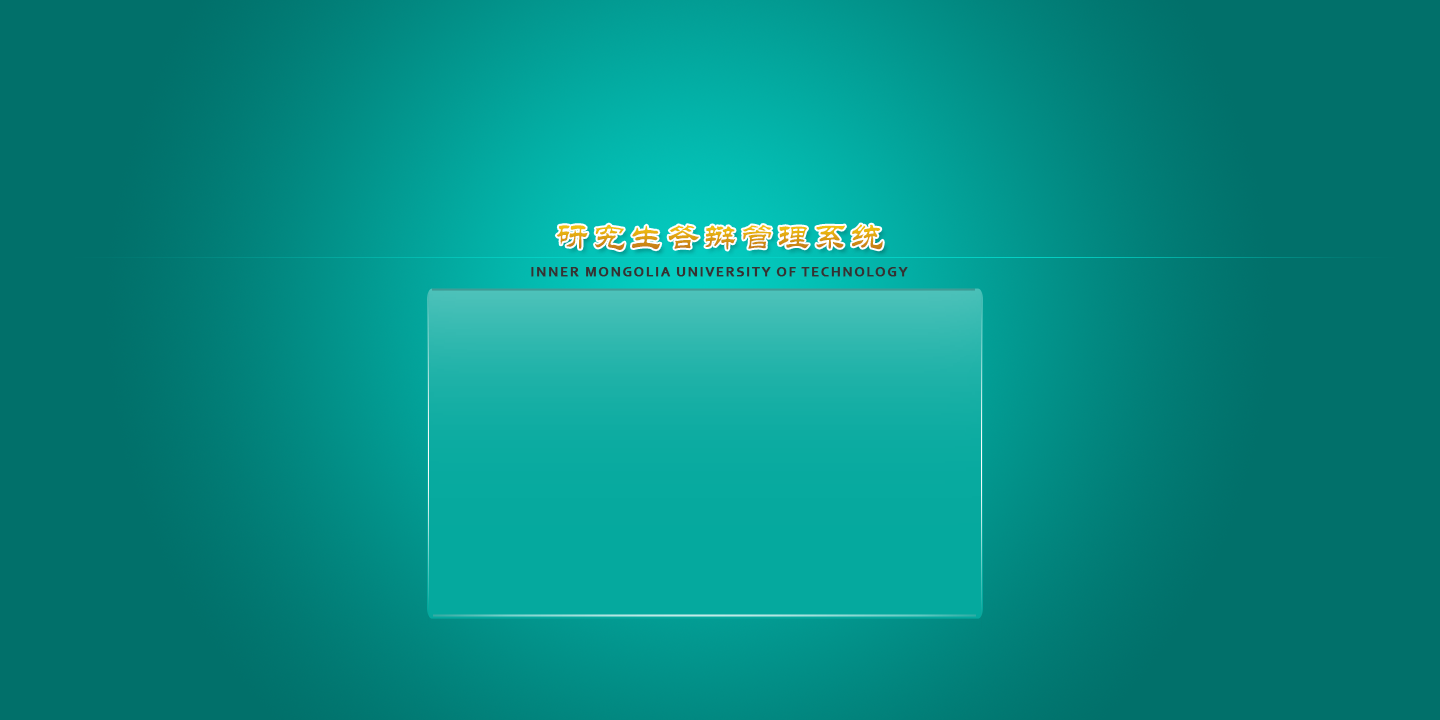
<style>
.page{position:relative;width:1440px;height:720px;background:#01706a}
.page>*{position:absolute;margin:0}
.t1{font:36px "STLiti";letter-spacing:0.1em;scale:0.93 1}
.t2{font:14px "Corbel-Bold";letter-spacing:0.1em;color:#333333;font-weight:bold}
</style>
<div class="page">
<p class="t1" style="left:556px;top:224px;width:327px;height:26px">研究生答辩管理系统</p>
<p class="t2" style="left:531px;top:267px;width:377px;height:10px">INNER MONGOLIA UNIVERSITY OF TECHNOLOGY</p>
</div>
